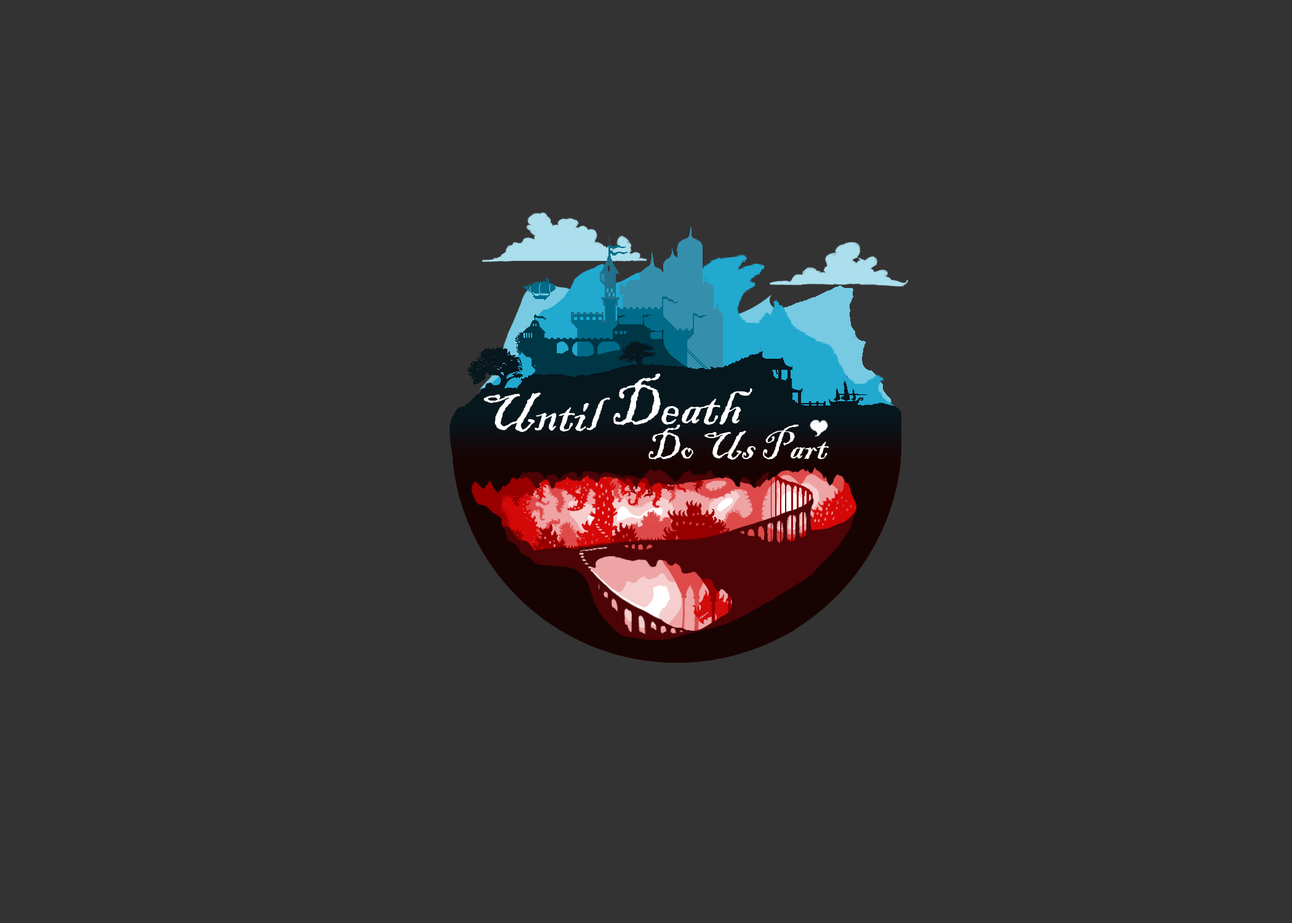
<style>
.page{position:relative;width:1292px;height:923px;background:#333333}
.page>*{position:absolute;margin:0}
.t1{font:61.5px "BlackadderITC-Regular";color:#ffffff}
.t2{font:56.4px "BlackadderITC-Regular";color:#ffffff}
.t3{font:41px "BlackadderITC-Regular";color:#ffffff}
</style>
<div class="page">
<p class="t1" style="left:613px;top:373px;width:139px;height:52px">Death</p>
<p class="t2" style="left:484px;top:393px;width:126px;height:39px">Until</p>
<p class="t3" style="left:648px;top:425px;width:181px;height:35px">Do Us Part</p>
</div>
